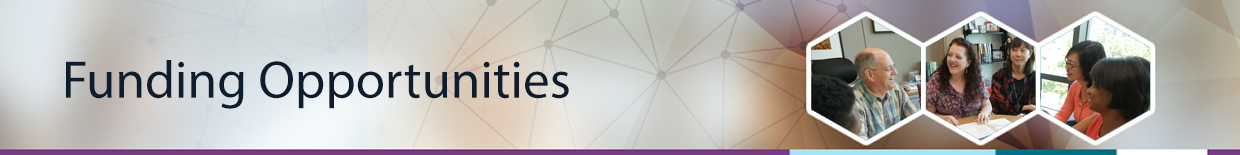
<style>
.page{position:relative;width:1240px;height:155px}
.page>*{position:absolute;margin:0}
.t1{font:53.3px "MyriadPro-Regular";color:#0d1d2d}
</style>
<div class="page">
<p class="t1" style="left:66px;top:60px;width:503px;height:49px">Funding Opportunities</p>
</div>
